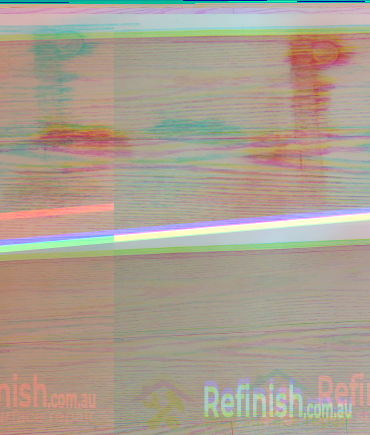
<style>
.page{position:relative;width:370px;height:435px}
.page>*{position:absolute;margin:0}
.t1{font:42.8px "Montserrat-SemiBold";font-weight:bold;scale:0.54 1}
</style>
<div class="page">
<p class="t1" style="left:204px;top:369px;width:99px;height:35px">Refinish</p>
</div>
